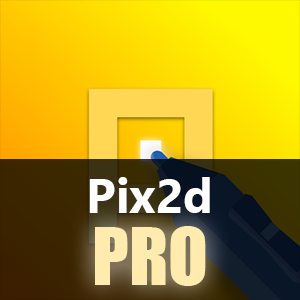
<style>
.page{position:relative;width:300px;height:300px}
.page>*{position:absolute;margin:0}
.t1{font:48px "SegoeUI-Bold";color:#ffffff}
.t2{font:73px "Impact";color:#feebad}
</style>
<div class="page">
<p class="t1" style="left:89px;top:177px;width:121px;height:36px">Pix2d</p>
<p class="t2" style="left:95px;top:226px;width:111px;height:60px">PRO</p>
</div>
